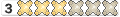
<style>
.page{position:relative;width:120px;height:17px;background:#ffffff}
.page>*{position:absolute;margin:0}
.t1{font:14px "FranklinGothic-Medium";letter-spacing:-0.05em;color:#303030;text-transform:uppercase}
</style>
<div class="page">
<p class="t1" style="left:4px;top:3px;width:9px;height:11px">3</p>
</div>
